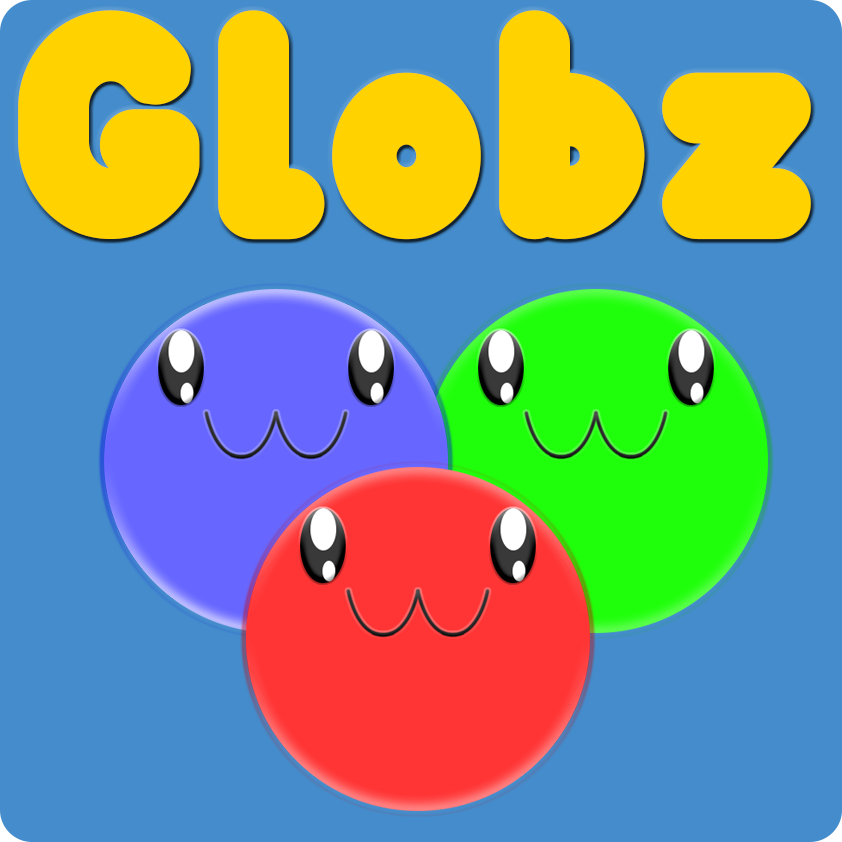
<style>
.page{position:relative;width:842px;height:842px;background:#448ccb}
.page>*{position:absolute;margin:0}
.t1{font:250px "FunnyandCute";color:#ffd200}
</style>
<div class="page">
<p class="t1" style="left:18px;top:10px;width:793px;height:230px">Globz</p>
</div>
